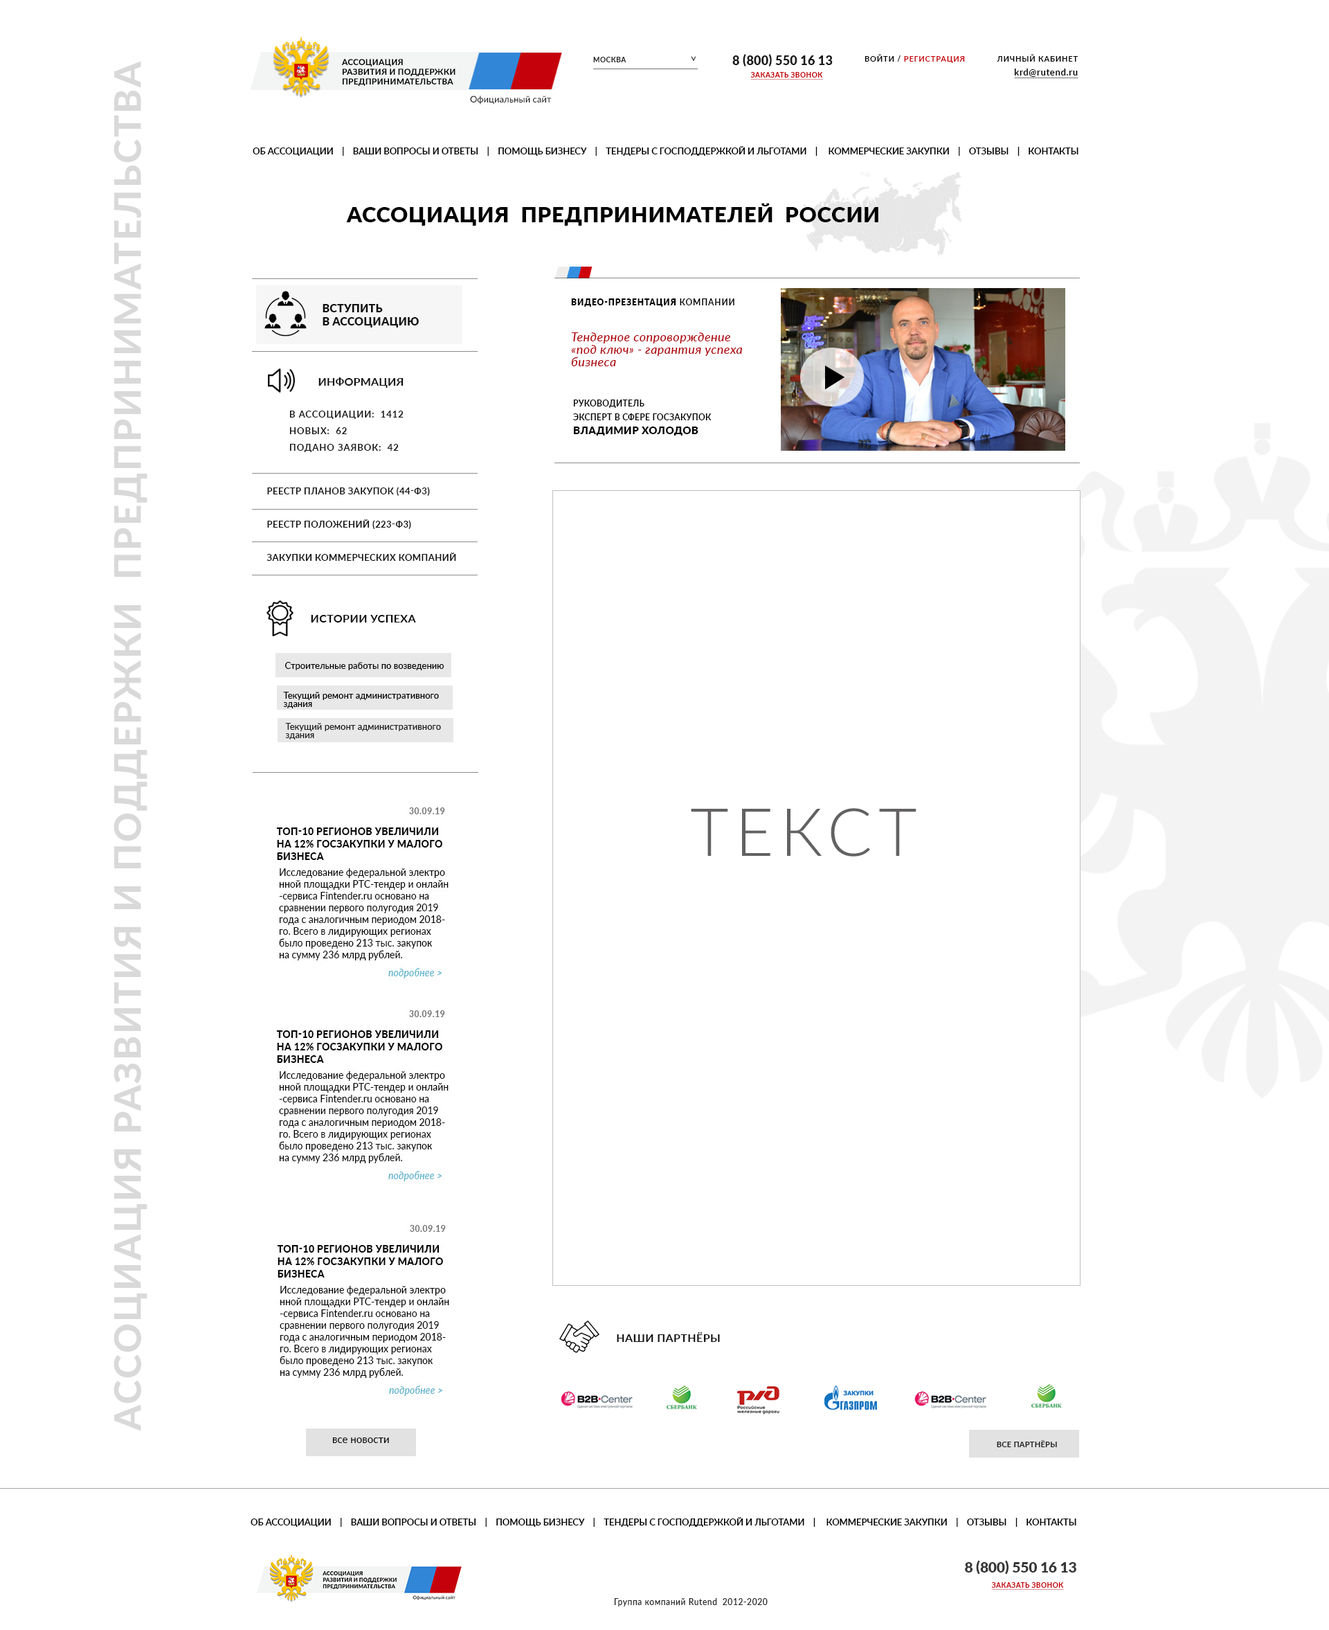
<style>
.page{position:relative;width:1329px;height:1630px;background:#ffffff}
.page>*{position:absolute;margin:0}
.t1{font:12.5px "Lato-Black";letter-spacing:0.01em;color:#1b1b1b;text-transform:uppercase}
.t2{font:7.6px "Lato-Bold";letter-spacing:0.075em;color:#c5020b;text-transform:uppercase}
.t3{font:7.6px "Lato-Bold";letter-spacing:0.075em;color:#000000;text-transform:uppercase}
.t4{font:36.7px "Lato-Heavy";letter-spacing:0.05em;color:#d9d9d9;text-transform:uppercase}
.t5{font:8.3px/9.7px "Lato-Heavy";letter-spacing:0.01em;color:#000000;text-transform:uppercase}
.t6{font:6.9px "Lato-Bold";letter-spacing:0.05em;color:#2b2b2b;text-transform:uppercase}
.t7{font:11.1px "Lato-Medium";letter-spacing:0.05em;color:#2b2b2b;text-transform:uppercase}
.t8{font:6.9px "Lato-Bold";letter-spacing:0.05em;color:#c5020b;text-transform:uppercase;text-decoration:underline}
.t9{font:9px "Lato-Bold";letter-spacing:0.05em;color:#000000;text-decoration:underline}
.t10{font:9px "Lato-Medium";color:#1e1e1e}
.t11{font:9px "Lato-Bold";letter-spacing:-0.005em;color:#000000;text-transform:uppercase}
.t12{font:21.5px "Lato-Black";letter-spacing:0.025em;color:#000000;text-transform:uppercase}
.t13{font:11.1px/13.2px "Lato-Black";letter-spacing:0.01em;color:#101010;text-transform:uppercase}
.t14{font:8.3px "Lato-Black";letter-spacing:0.075em;color:#000000;text-transform:uppercase}
.t15{font:8.3px "Lato-Bold";letter-spacing:0.075em;color:#000000;text-transform:uppercase}
.t16{font:12.5px/12.5px "Lato-MediumItalic";letter-spacing:0.025em;color:#af0109}
.t17{font:12.5px/12.5px "Lato-MediumItalic";letter-spacing:0.01em;color:#af0109}
.t18{font:11.1px "Lato-Bold";letter-spacing:0.01em;color:#131313;text-transform:uppercase}
.t19{font:8.3px/13.8px "Lato-Bold";letter-spacing:0.025em;color:#000000;text-transform:uppercase}
.t20{font:10.4px/13.8px "Lato-Black";letter-spacing:0.025em;color:#000000;text-transform:uppercase}
.t21{font:9px/8.3px "Lato-Bold";letter-spacing:0.075em;color:#181818;text-transform:uppercase}
.t22{font:9px/16.6px "Lato-Bold";letter-spacing:0.035em;color:#141414;text-transform:uppercase}
.t23{font:11.1px "Lato-Bold";letter-spacing:0.025em;color:#0b0b0b;text-transform:uppercase}
.t24{font:9px "Lato-Medium";color:#000000}
.t25{font:9px/8.3px "Lato-Medium";color:#000000}
.t26{font:9px/8.3px "Lato-Medium";color:#1f1f1f}
.t27{font:66.5px "Lato-Light";letter-spacing:0.1em;color:#636161;text-transform:uppercase}
.t28{font:11.1px "Lato-Bold";letter-spacing:0.025em;color:#121212;text-transform:uppercase}
.t29{font:10.4px "Lato-Medium";color:#000000}
.t30{font:7.6px "Lato-Bold";letter-spacing:0.025em;color:#1d1d1d;text-transform:uppercase}
.t31{font:14.5px "Lato-Black";letter-spacing:-0.01em;color:#373636;text-transform:uppercase}
.t32{font:8.3px "Lato-Medium";letter-spacing:0.05em;color:#282828}
</style>
<div class="page">
<p class="t1" style="left:732px;top:54px;width:101px;height:12px">8 (800) 550 16 13</p>
<p class="t2" style="left:865px;top:54px;width:100px;height:9px"><span class="t3">войти / </span>регистрация</p>
<p class="t3" style="left:997px;top:54px;width:82px;height:8px">личный кабинет</p>
<p class="t4" style="left:114px;top:61px;width:33px;height:1370px;rotate:-90deg">Ассоциация развития и поддержки  предпринимательства</p>
<p class="t5" style="left:341px;top:59px;width:115px;height:27px">Ассоциация<br>развития и поддержки <br>предпринимательства</p>
<p class="t6" style="left:593px;top:57px;width:34px;height:5px">Москва</p>
<p class="t7" style="left:691px;top:56px;width:5px;height:5px;rotate:90deg">&gt;</p>
<p class="t8" style="left:750px;top:72px;width:73px;height:8px">ЗАКАЗАТЬ ЗВОНОК</p>
<p class="t9" style="left:1014px;top:69px;width:65px;height:9px">krd@rutend.ru</p>
<p class="t10" style="left:470px;top:96px;width:82px;height:9px">Официальный сайт</p>
<p class="t11" style="left:253px;top:146px;width:826px;height:10px">об ассоциации    |    Ваши вопросы и ответы    |    помощь бизнесу    |    тендеры с господдержкой и льготами    |     коммерческие закупки    |    отзывы    |    контакты</p>
<p class="t12" style="left:346px;top:203px;width:533px;height:23px">ассоциация  предпринимателей  России</p>
<p class="t13" style="left:323px;top:304px;width:96px;height:23px">вступить <br>в ассоциацию</p>
<p class="t14" style="left:571px;top:298px;width:164px;height:9px">видео-презентация<span class="t15"> компании</span></p>
<p class="t16" style="left:571px;top:332px;width:171px;height:34px"><span class="t17"><br></span>Тендерное сопроворждение <br>«под ключ» - гарантия успеха <br>бизнеса</p>
<p class="t18" style="left:318px;top:377px;width:86px;height:11px">информация</p>
<p class="t19" style="left:573px;top:399px;width:139px;height:36px">Руководитель <br>эксперт в сфере госзакупок<br><span class="t20">Владимир Холодов</span></p>
<p class="t21" style="left:289px;top:411px;width:115px;height:41px">В ассоциации:  1412<br><br>новых:  62 <br><br>подано заявок:  42</p>
<p class="t22" style="left:267px;top:487px;width:189px;height:74px">реестр планов закупок (44-ф3)<br><br>реестр положений (223-ф3)<br><br>закупки коммерческих компаний</p>
<p class="t23" style="left:311px;top:615px;width:105px;height:7px">истории успеха</p>
<p class="t24" style="left:285px;top:662px;width:159px;height:8px">Строительные работы по возведению</p>
<p class="t25" style="left:283px;top:692px;width:156px;height:16px">Текущий ремонт административного <br>здания</p>
<p class="t26" style="left:285px;top:723px;width:156px;height:16px">Текущий ремонт административного <br>здания</p>
<p class="t27" style="left:691px;top:808px;width:226px;height:48px">текст</p>
<p class="t28" style="left:617px;top:1332px;width:103px;height:10px">наши партнёры</p>
<p class="t29" style="left:332px;top:1437px;width:57px;height:6px">все новости</p>
<p class="t30" style="left:997px;top:1440px;width:60px;height:7px">все партнёры</p>
<p class="t11" style="left:251px;top:1517px;width:826px;height:10px">об ассоциации    |    Ваши вопросы и ответы    |    помощь бизнесу    |    тендеры с господдержкой и льготами    |     коммерческие закупки    |    отзывы    |    контакты</p>
<p class="t31" style="left:965px;top:1560px;width:112px;height:14px">8 (800) 550 16 13</p>
<p class="t8" style="left:991px;top:1582px;width:73px;height:8px">ЗАКАЗАТЬ ЗВОНОК</p>
<p class="t32" style="left:614px;top:1598px;width:154px;height:8px">Группа компаний Rutend  2012-2020</p>
</div>
